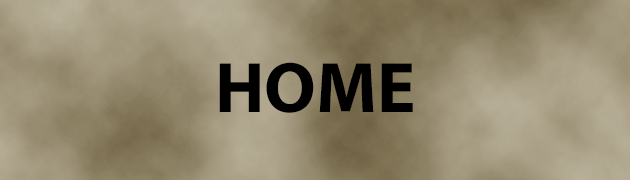
<style>
.page{position:relative;width:630px;height:180px}
.page>*{position:absolute;margin:0}
.t1{font:72px "MyriadPro-Bold";color:#000000}
</style>
<div class="page">
<p class="t1" style="left:219px;top:62px;width:194px;height:51px">HOME</p>
</div>
